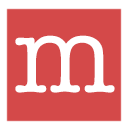
<style>
.page{position:relative;width:128px;height:128px;background:#d44949}
.page>*{position:absolute;margin:0}
.t1{font:108.4px "AmericanTypewriter";color:#ffffff}
</style>
<div class="page">
<p class="t1" style="left:15px;top:35px;width:100px;height:58px">m</p>
</div>
